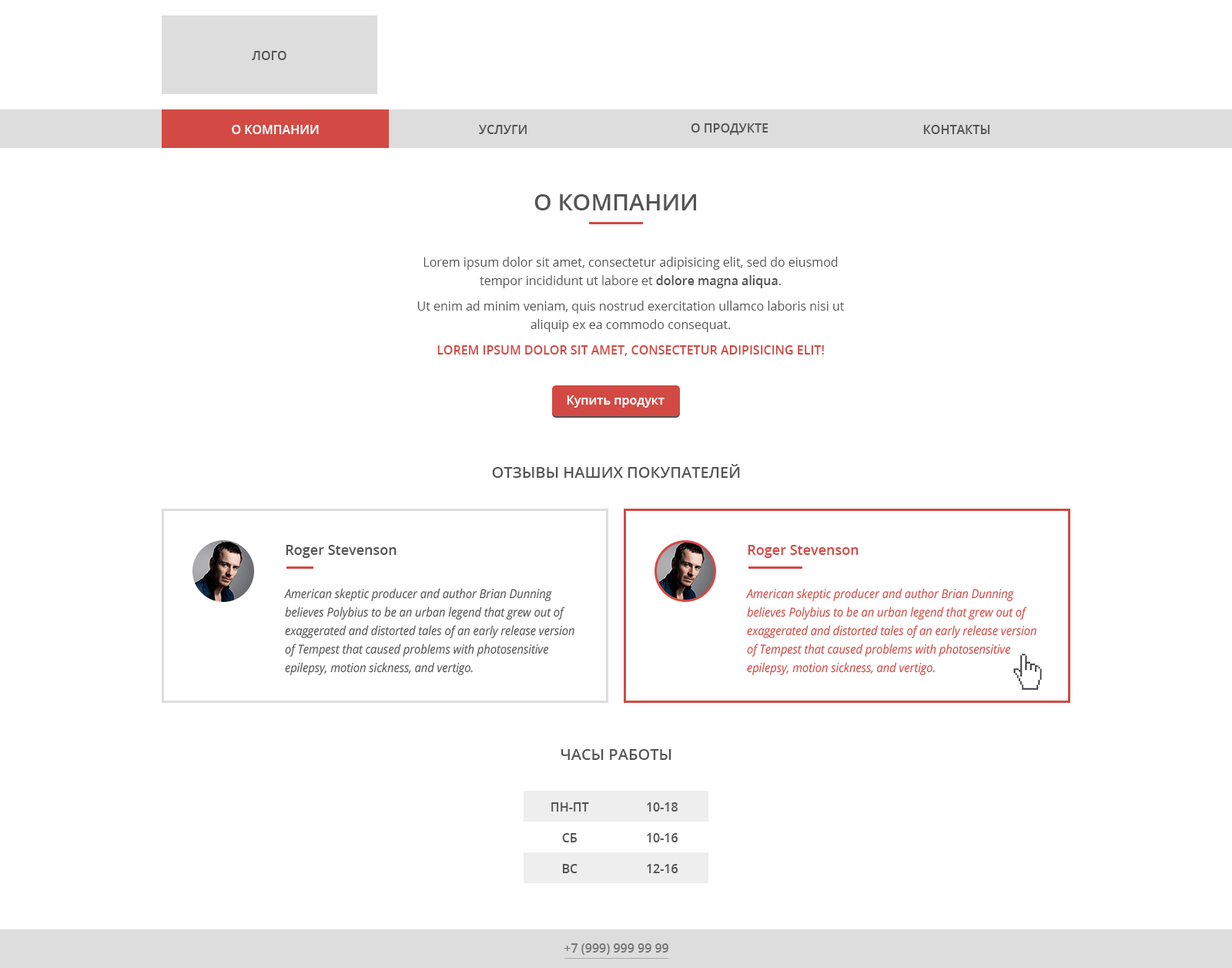
<style>
.page{position:relative;width:1232px;height:968px;background:#ffffff}
.page>*{position:absolute;margin:0}
.t1{font:12.3px "OpenSans-SemiBold";color:#555555;text-transform:uppercase}
.t2{font:12.3px "OpenSans-SemiBold";color:#ffffff;text-transform:uppercase}
.t3{font:23.1px "OpenSans-SemiBold";color:#555555;text-transform:uppercase}
.t4{font:12.3px/18.5px "OpenSans-Regular";color:#555555}
.t5{font:12.3px/18.5px "OpenSans-SemiBold";color:#555555}
.t6{font:12.3px "OpenSans-SemiBold";color:#d24a43;text-transform:uppercase}
.t7{font:12.3px "OpenSans-SemiBold";color:#ffffff}
.t8{font:15.4px "OpenSans-SemiBold";color:#555555;text-transform:uppercase}
.t9{font:13.9px "OpenSans-SemiBold";color:#555555}
.t10{font:13.9px "OpenSans-SemiBold";color:#d24a43}
.t11{font:12.3px/18.5px "OpenSans-Italic";color:#555555;scale:0.92 1}
.t12{font:12.3px/18.5px "OpenSans-Italic";color:#d24a43;scale:0.92 1}
.t13{font:12.3px "OpenSans-SemiBold";color:#767676;text-transform:uppercase}
</style>
<div class="page">
<p class="t1" style="left:252px;top:51px;width:35px;height:9px">Лого</p>
<p class="t2" style="left:232px;top:125px;width:87px;height:9px">О компании</p>
<p class="t1" style="left:479px;top:125px;width:48px;height:9px">Услуги</p>
<p class="t1" style="left:691px;top:123px;width:78px;height:12px">о продукте</p>
<p class="t1" style="left:924px;top:125px;width:67px;height:9px">Контакты</p>
<p class="t3" style="left:535px;top:194px;width:161px;height:16px">О компании</p>
<p class="t4" style="left:424px;top:257px;width:414px;height:31px;text-align:center">Lorem ipsum dolor sit amet, consectetur adipisicing elit, sed do eiusmod tempor incididunt ut labore et <span class="t5">dolore magna aliqua</span>.</p>
<p class="t4" style="left:418px;top:300px;width:427px;height:32px;text-align:center">Ut enim ad minim veniam, quis nostrud exercitation ullamco laboris nisi ut aliquip ex ea commodo consequat.</p>
<p class="t6" style="left:438px;top:345px;width:386px;height:11px">Lorem ipsum dolor sit amet, consectetur adipisicing elit!</p>
<p class="t7" style="left:567px;top:395px;width:98px;height:12px">Купить продукт</p>
<p class="t8" style="left:492px;top:464px;width:248px;height:14px">Отзывы наших покупателей</p>
<p class="t9" style="left:286px;top:545px;width:111px;height:13px">Roger Stevenson</p>
<p class="t10" style="left:748px;top:545px;width:111px;height:13px">Roger Stevenson</p>
<p class="t11" style="left:284px;top:588px;width:291px;height:87px">American skeptic producer and author Brian Dunning believes Polybius to be an urban legend that grew out of exaggerated and distorted tales of an early release version of Tempest that caused problems with photosensitive epilepsy, motion sickness, and vertigo.</p>
<p class="t12" style="left:746px;top:588px;width:291px;height:87px">American skeptic producer and author Brian Dunning believes Polybius to be an urban legend that grew out of exaggerated and distorted tales of an early release version of Tempest that caused problems with photosensitive epilepsy, motion sickness, and vertigo.</p>
<p class="t8" style="left:561px;top:749px;width:111px;height:11px">Часы работы</p>
<p class="t1" style="left:552px;top:802px;width:37px;height:9px">пн-пт</p>
<p class="t1" style="left:647px;top:802px;width:31px;height:9px">10-18</p>
<p class="t1" style="left:562px;top:833px;width:16px;height:9px">сб</p>
<p class="t1" style="left:647px;top:833px;width:32px;height:9px">10-16</p>
<p class="t1" style="left:562px;top:864px;width:16px;height:9px">вс</p>
<p class="t1" style="left:647px;top:864px;width:32px;height:9px">12-16</p>
<p class="t13" style="left:564px;top:943px;width:105px;height:11px">+7 (999) 999 99 99</p>
</div>
